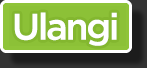
<style>
.page{position:relative;width:147px;height:68px;background:#ffffff}
.page>*{position:absolute;margin:0}
.t1{font:37px "iCielGotham-Medium";letter-spacing:-0.06em;color:#ffffff}
</style>
<div class="page">
<p class="t1" style="left:14px;top:12px;width:103px;height:34px">Ulangi</p>
</div>
